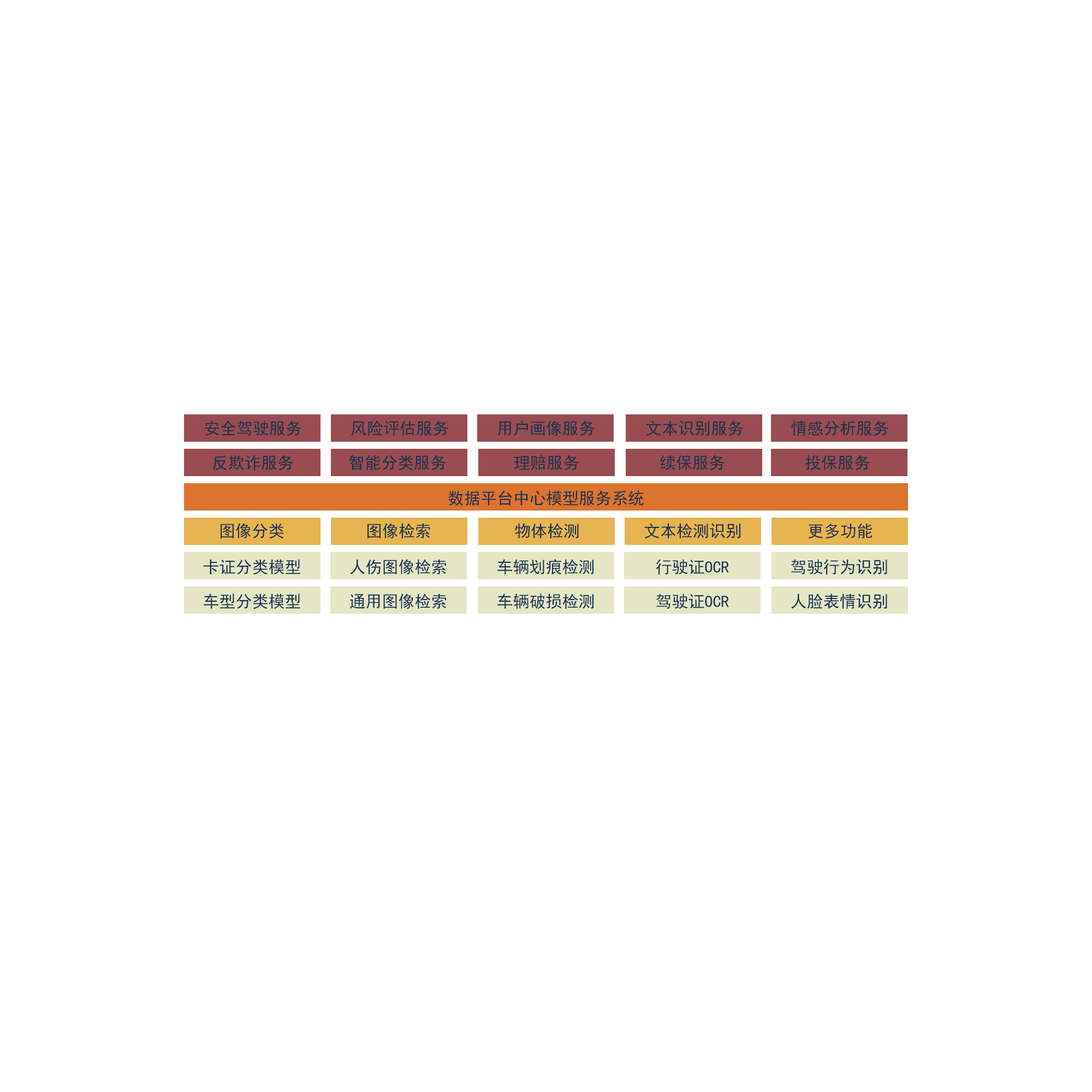
<style>
.page{position:relative;width:1092px;height:1092px;background:#ffffff}
.page>*{position:absolute;margin:0}
.t1{font:16.4px "SimHei";color:#18334e}
</style>
<div class="page">
<p class="t1" style="left:205px;top:420px;width:96px;height:16px">安全驾驶服务</p>
<p class="t1" style="left:351px;top:420px;width:97px;height:16px">风险评估服务</p>
<p class="t1" style="left:497px;top:420px;width:98px;height:16px">用户画像服务</p>
<p class="t1" style="left:646px;top:420px;width:97px;height:16px">文本识别服务</p>
<p class="t1" style="left:791px;top:420px;width:97px;height:16px">情感分析服务</p>
<p class="t1" style="left:212px;top:455px;width:81px;height:16px">反欺诈服务</p>
<p class="t1" style="left:349px;top:455px;width:97px;height:16px">智能分类服务</p>
<p class="t1" style="left:514px;top:455px;width:65px;height:16px">理赔服务</p>
<p class="t1" style="left:660px;top:455px;width:65px;height:16px">续保服务</p>
<p class="t1" style="left:805px;top:455px;width:65px;height:16px">投保服务</p>
<p class="t1" style="left:448px;top:490px;width:196px;height:16px">数据平台中心模型服务系统</p>
<p class="t1" style="left:221px;top:523px;width:63px;height:16px">图像分类</p>
<p class="t1" style="left:367px;top:523px;width:63px;height:16px">图像检索</p>
<p class="t1" style="left:515px;top:523px;width:64px;height:15px">物体检测</p>
<p class="t1" style="left:644px;top:523px;width:97px;height:15px">文本检测识别</p>
<p class="t1" style="left:808px;top:523px;width:64px;height:16px">更多功能</p>
<p class="t1" style="left:204px;top:559px;width:96px;height:16px">卡证分类模型</p>
<p class="t1" style="left:350px;top:559px;width:97px;height:16px">人伤图像检索</p>
<p class="t1" style="left:497px;top:559px;width:97px;height:16px">车辆划痕检测</p>
<p class="t1" style="left:656px;top:559px;width:73px;height:16px">行驶证OCR</p>
<p class="t1" style="left:791px;top:559px;width:96px;height:16px">驾驶行为识别</p>
<p class="t1" style="left:204px;top:593px;width:96px;height:16px">车型分类模型</p>
<p class="t1" style="left:349px;top:593px;width:98px;height:16px">通用图像检索</p>
<p class="t1" style="left:497px;top:593px;width:97px;height:16px">车辆破损检测</p>
<p class="t1" style="left:656px;top:593px;width:73px;height:16px">驾驶证OCR</p>
<p class="t1" style="left:791px;top:593px;width:96px;height:16px">人脸表情识别</p>
</div>
